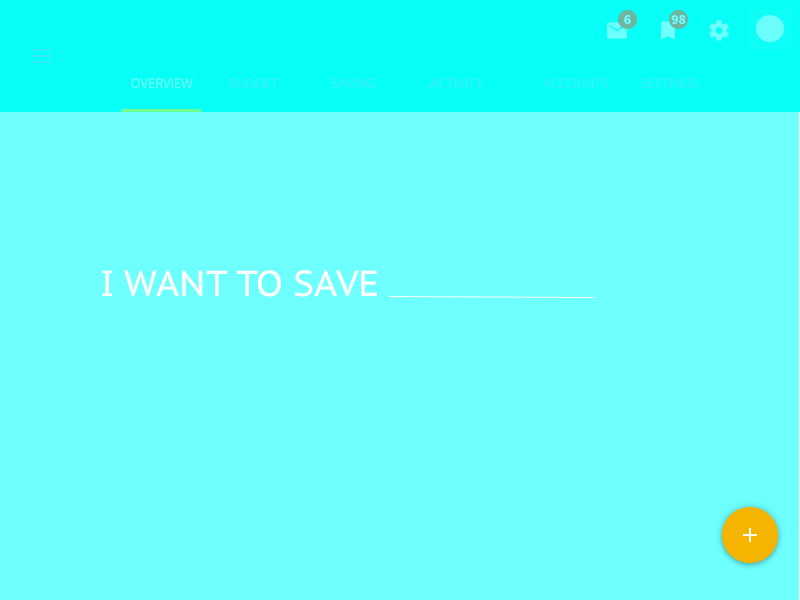
<style>
.page{position:relative;width:800px;height:600px;background:#6effff}
.page>*{position:absolute;margin:0}
.t1{font:14px "SourceSansPro-Bold";color:#6effff}
.t2{font:14px "MyriadPro-Regular";color:#6effff;text-transform:uppercase}
.t3{font:14px "MyriadPro-Regular";color:#38ecfd;text-transform:uppercase}
.t4{font:36px "PTSans-Caption";color:#ffffff;text-transform:uppercase}
</style>
<div class="page">
<p class="t1" style="left:624px;top:15px;width:7px;height:9px">6</p>
<p class="t1" style="left:671px;top:15px;width:15px;height:9px">98</p>
<p class="t2" style="left:131px;top:78px;width:62px;height:10px">OVERVIEW</p>
<p class="t3" style="left:229px;top:78px;width:49px;height:10px">budget</p>
<p class="t3" style="left:331px;top:78px;width:44px;height:10px">Saving</p>
<p class="t3" style="left:430px;top:78px;width:54px;height:10px">Activity</p>
<p class="t3" style="left:543px;top:78px;width:65px;height:10px">Accounts</p>
<p class="t3" style="left:641px;top:78px;width:56px;height:10px">Settings</p>
<p class="t4" style="left:102px;top:270px;width:275px;height:27px">I WANT TO SAVE</p>
</div>
